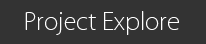
<style>
.page{position:relative;width:206px;height:44px;background:#333333}
.page>*{position:absolute;margin:0}
.t1{font:24px "KozGoPr6N-ExtraLight";color:#ffffff}
</style>
<div class="page">
<p class="t1" style="left:25px;top:11px;width:154px;height:24px">Project Explore</p>
</div>
